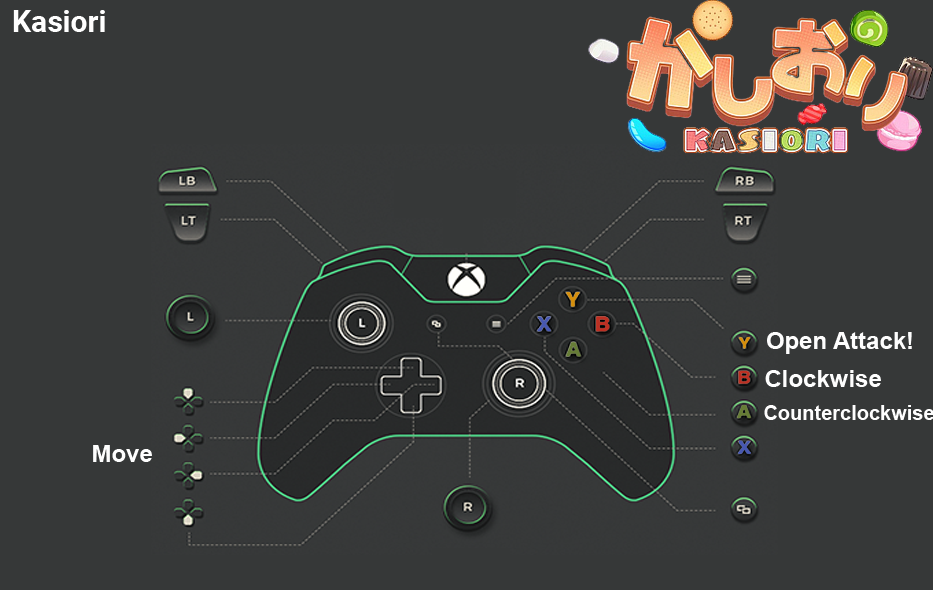
<style>
.page{position:relative;width:933px;height:590px;background:#363838}
.page>*{position:absolute;margin:0}
.t1{font:30px "Roboto-Bold";color:#ffffff}
.t2{font:24px "Arial-BoldMT";color:#fefefe}
.t3{font:20px "Arial-BoldMT";color:#fefefe}
</style>
<div class="page">
<p class="t1" style="left:13px;top:10px;width:92px;height:22px">Kasiori</p>
<p class="t2" style="left:767px;top:332px;width:145px;height:22px">Open Attack!</p>
<p class="t2" style="left:765px;top:370px;width:116px;height:17px">Clockwise</p>
<p class="t3" style="left:764px;top:405px;width:170px;height:15px">Counterclockwise</p>
<p class="t2" style="left:93px;top:445px;width:59px;height:17px">Move</p>
</div>
